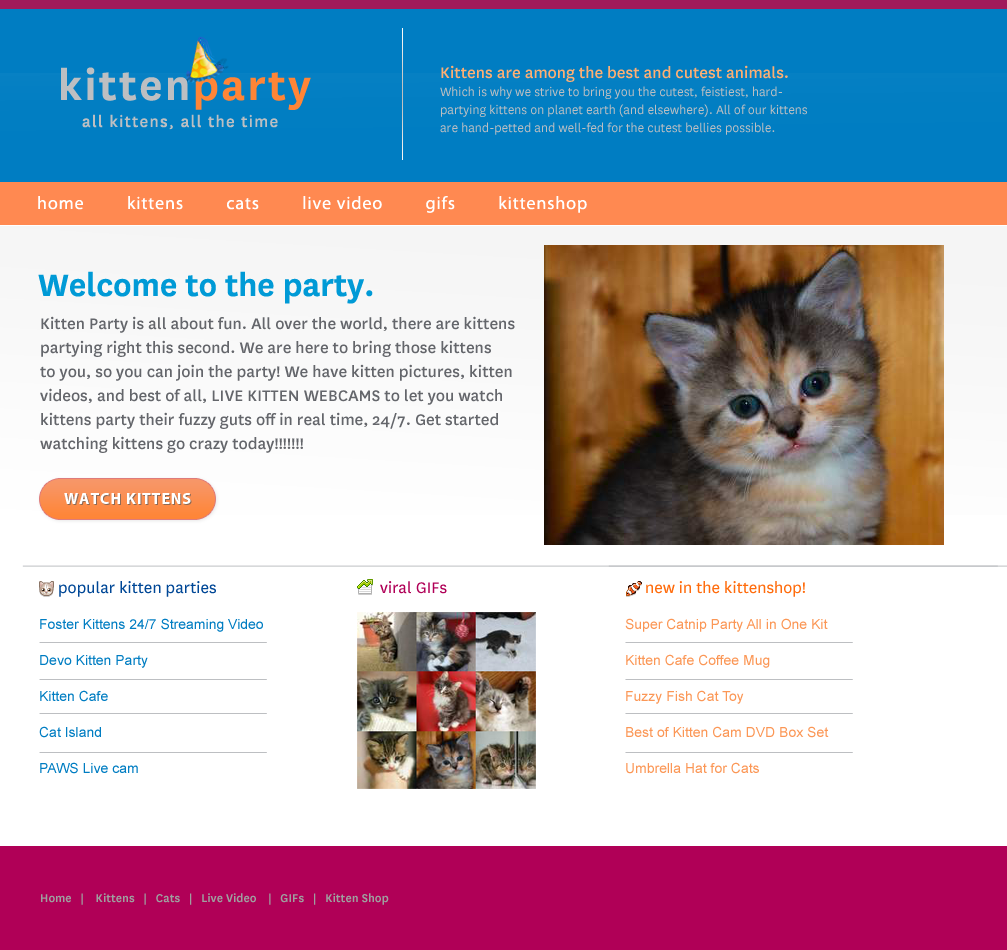
<style>
.page{position:relative;width:1007px;height:950px;background:#ffffff}
.page>*{position:absolute;margin:0}
.t1{font:18px "National-Medium";color:#feaf73}
.t2{font:48px "National-Semibold";letter-spacing:0.05em;color:#bdbfc2}
.t3{font:48px "National-Semibold";letter-spacing:0.05em;color:#ff8536}
.t4{font:14px/18px "National-Book";color:#bdbfc2}
.t5{font:18px "National-Regular";letter-spacing:0.075em;color:#bdbfc2}
.t6{font:18px "MyriadPro-Regular";letter-spacing:0.05em;color:#ffffff}
.t7{font:36px "National-Semibold";color:#009ad6}
.t8{font:18px/24px "National-Medium";color:#64666b}
.t9{font:16px "MyriadPro-Bold";letter-spacing:0.05em;color:#ffffff}
.t10{font:18px "National-Regular";color:#004796}
.t11{font:18px "National-Regular";color:#b00057}
.t12{font:18px "National-Regular";color:#ff6c0d}
.t13{font:14px/36px "ArialMT";color:#007dc2}
.t14{font:14px/36px "ArialMT";color:#fb9756}
.t15{font:13px "National-Semibold";color:#9f9f9f}
</style>
<div class="page">
<p class="t1" style="left:441px;top:65px;width:347px;height:17px">Kittens are among the best and cutest animals.</p>
<p class="t2" style="left:61px;top:67px;width:250px;height:43px">kitten<span class="t3">party</span></p>
<p class="t4" style="left:440px;top:86px;width:367px;height:49px;text-align:justify">Which is why we strive to bring you the cutest, feistiest, hard-<br>partying kittens on planet earth (and elsewhere). All of our kittens<br>are hand-petted and well-fed for the cutest bellies possible.</p>
<p class="t5" style="left:82px;top:114px;width:196px;height:16px">all kittens, all the time</p>
<p class="t6" style="left:38px;top:196px;width:549px;height:17px">home         kittens         cats         live video         gifs         kittenshop</p>
<p class="t7" style="left:38px;top:271px;width:335px;height:33px">Welcome to the party.</p>
<p class="t8" style="left:40px;top:316px;width:475px;height:137px;text-align:justify">Kitten Party is all about fun. All over the world, there are kittens<br>partying right this second. We are here to bring those kittens<br>to you, so you can join the party! We have kitten pictures, kitten<br>videos, and best of all, LIVE KITTEN WEBCAMS to let you watch <br>kittens party their fuzzy guts off in real time, 24/7. Get started <br>watching kittens go crazy today!!!!!!!</p>
<p class="t9" style="left:64px;top:493px;width:127px;height:11px">WATCH KITTENS</p>
<p class="t10" style="left:59px;top:581px;width:157px;height:16px">popular kitten parties</p>
<p class="t11" style="left:380px;top:581px;width:67px;height:13px">viral GIFs</p>
<p class="t12" style="left:646px;top:581px;width:159px;height:16px">new in the kittenshop!</p>
<p class="t13" style="left:39px;top:618px;width:224px;height:156px">Foster Kittens 24/7 Streaming Video<br>Devo Kitten Party<br>Kitten Cafe<br>Cat Island<br>PAWS Live cam</p>
<p class="t14" style="left:625px;top:618px;width:204px;height:156px">Super Catnip Party All in One Kit<br>Kitten Cafe Coffee Mug<br>Fuzzy Fish Cat Toy<br>Best of Kitten Cam DVD Box Set<br>Umbrella Hat for Cats</p>
<p class="t15" style="left:41px;top:893px;width:348px;height:12px">Home   |    Kittens   |   Cats   |   Live Video    |   GIFs   |   Kitten Shop</p>
</div>
